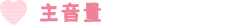
<style>
.page{position:relative;width:242px;height:25px;background:#ffffff}
.page>*{position:absolute;margin:0}
.t1{font:21.2px "shetumodengxiaofangti";color:#ef8299;font-weight:bold}
</style>
<div class="page">
<p class="t1" style="left:40px;top:2px;width:61px;height:20px">主音量</p>
</div>
